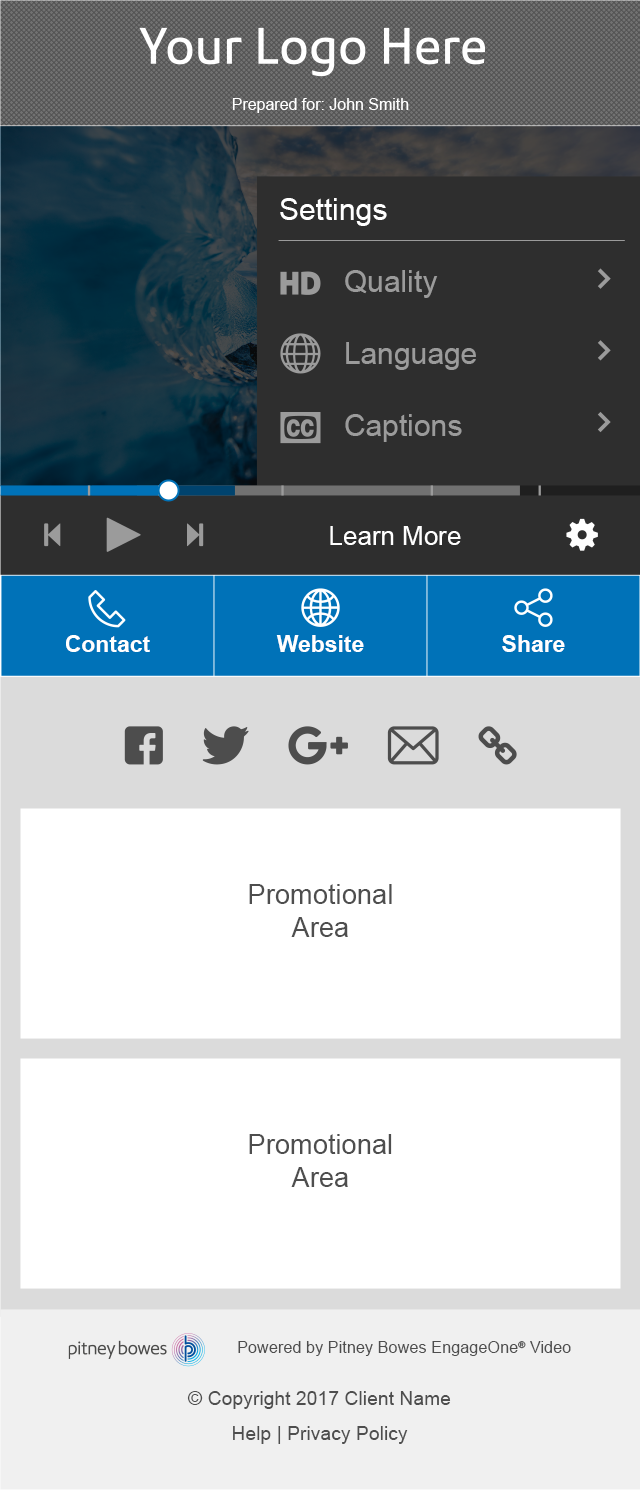
<style>
.page{position:relative;width:640px;height:1490px;background:#ffffff}
.page>*{position:absolute;margin:0}
.t1{font:16px "ArialMT";color:#ffffff}
.t2{font:30px/72px "ArialMT";color:#9b9b9b}
.t3{font:30px/72px "ArialMT";color:#ffffff}
.t4{font:26px "ArialMT";color:#ffffff}
.t5{font:23.1px "Arial-BoldMT";color:#ffffff}
.t6{font:27.3px "ArialMT";color:#4e4e4e}
.t7{font:16.3px "ArialMT";color:#4e4e4e}
.t8{font:19.3px "ArialMT";color:#4e4e4e}
</style>
<div class="page">
<p class="t1" style="left:232px;top:98px;width:177px;height:15px">Prepared for: John Smith</p>
<p class="t2" style="left:280px;top:198px;width:196px;height:244px"><span class="t3">Settings<br></span> Quality<br> Language<br> Captions</p>
<p class="t4" style="left:330px;top:526px;width:131px;height:19px">Learn More</p>
<p class="t5" style="left:66px;top:635px;width:84px;height:17px">Contact</p>
<p class="t5" style="left:276px;top:635px;width:88px;height:17px">Website</p>
<p class="t5" style="left:502px;top:635px;width:63px;height:17px">Share</p>
<p class="t6" style="left:249px;top:884px;width:143px;height:53px;text-align:center">Promotional <br>Area</p>
<p class="t6" style="left:249px;top:1134px;width:143px;height:53px;text-align:center">Promotional <br>Area</p>
<p class="t7" style="left:238px;top:1341px;width:333px;height:15px">Powered by Pitney Bowes EngageOne® Video</p>
<p class="t8" style="left:187px;top:1391px;width:264px;height:18px">© Copyright 2017 Client Name</p>
<p class="t8" style="left:233px;top:1426px;width:175px;height:18px">Help | Privacy Policy</p>
</div>
